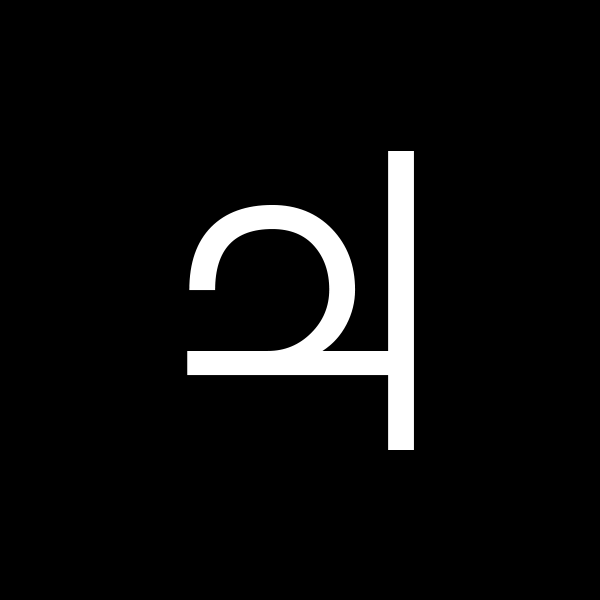
<style>
.page{position:relative;width:600px;height:600px;background:#000000}
.page>*{position:absolute;margin:0}
.t1{font:428.5px "ArialUnicodeMS";color:#ffffff}
</style>
<div class="page">
<p class="t1" style="left:187px;top:151px;width:227px;height:299px">♃</p>
</div>
